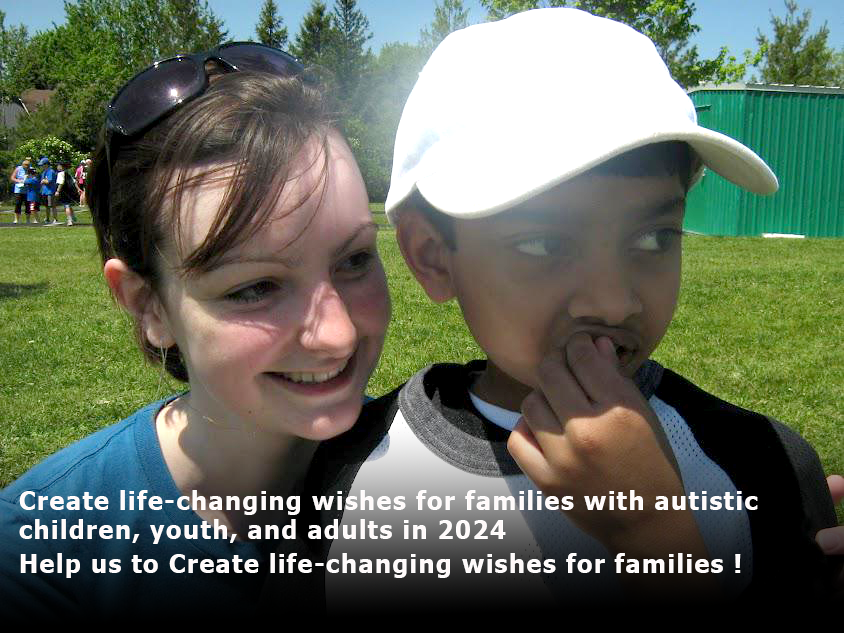
<style>
.page{position:relative;width:844px;height:633px}
.page>*{position:absolute;margin:0}
.t1{font:25.4px/3.6px "Tahoma-Bold";letter-spacing:0.05em;color:#fff9f9}
.t2{font:25.4px "Tahoma-Bold";letter-spacing:0.05em;color:#fff9f9}
</style>
<div class="page">
<p class="t1" style="left:19px;top:490px;width:739px;height:54px">Create life-changing wishes for families with autistic <br><br><br><br><br><br><br><br>children, youth, and adults in 2024</p>
<p class="t2" style="left:20px;top:553px;width:721px;height:25px">Help us to Create life-changing wishes for families !</p>
</div>
